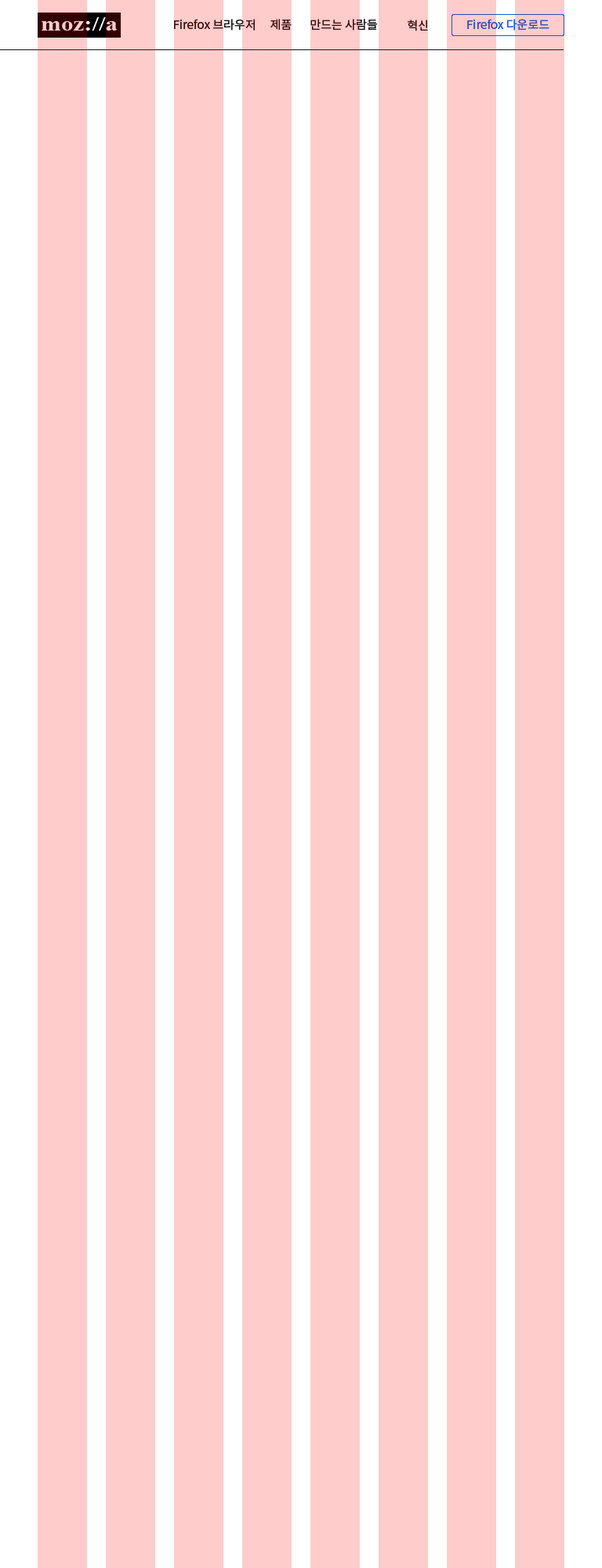
<style>
.page{position:relative;width:602px;height:1568px;background:#ffcccc}
.page>*{position:absolute;margin:0}
.t1{font:11.8px "NotoSansKR-Regular";color:#410e0e}
.t2{font:11.8px "NotoSansKR-Regular"}
.t3{font:11.8px "NotoSansKR-Regular";color:#334db2}
</style>
<div class="page">
<p class="t1" style="left:174px;top:19px;width:81px;height:12px">Firefox 브라우저</p>
<p class="t1" style="left:174px;top:19px;width:81px;height:12px">Firefox 브라우저</p>
<p class="t1" style="left:270px;top:19px;width:22px;height:11px">제품</p>
<p class="t1" style="left:270px;top:19px;width:22px;height:11px">제품</p>
<p class="t2" style="left:310px;top:19px;width:68px;height:12px">만드는 사람들</p>
<p class="t2" style="left:310px;top:19px;width:68px;height:12px">만드는 사람들</p>
<p class="t1" style="left:408px;top:20px;width:20px;height:11px">혁신</p>
<p class="t1" style="left:408px;top:20px;width:20px;height:11px">혁신</p>
<p class="t3" style="left:467px;top:19px;width:83px;height:12px">Firefox 다운로드</p>
<p class="t3" style="left:467px;top:19px;width:83px;height:12px">Firefox 다운로드</p>
</div>
